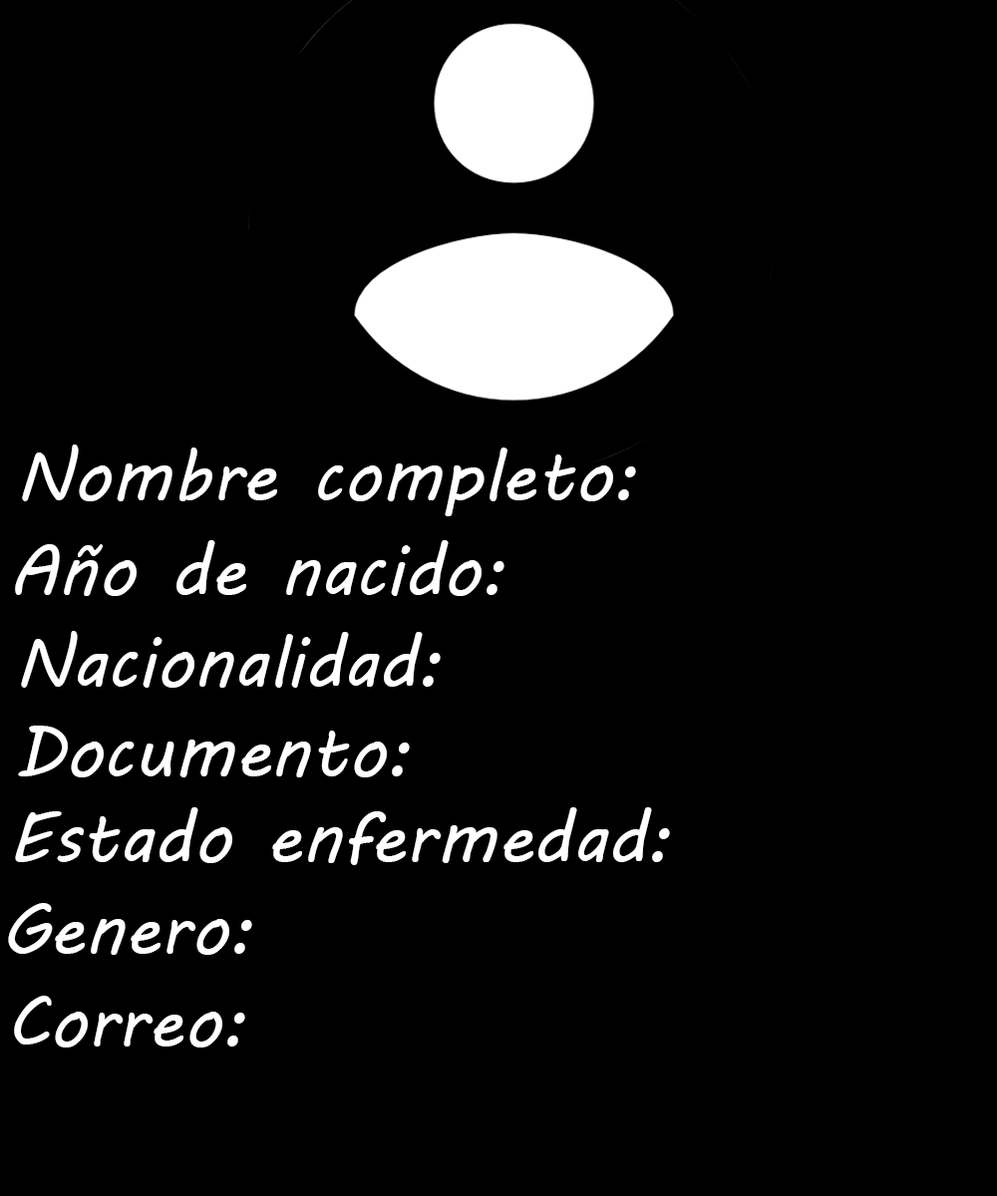
<style>
.page{position:relative;width:997px;height:1196px;background:#000000}
.page>*{position:absolute;margin:0}
.t1{font:71.8px "MVBoli";color:#ffffff}
</style>
<div class="page">
<p class="t1" style="left:22px;top:445px;width:614px;height:71px">Nombre completo:</p>
<p class="t1" style="left:15px;top:540px;width:489px;height:56px">Año de nacido:</p>
<p class="t1" style="left:21px;top:631px;width:420px;height:57px">Nacionalidad:</p>
<p class="t1" style="left:18px;top:726px;width:392px;height:52px">Documento:</p>
<p class="t1" style="left:15px;top:807px;width:655px;height:58px">Estado enfermedad:</p>
<p class="t1" style="left:8px;top:903px;width:244px;height:52px">Genero:</p>
<p class="t1" style="left:14px;top:996px;width:231px;height:52px">Correo:</p>
</div>
